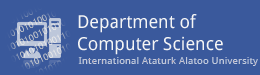
<style>
.page{position:relative;width:260px;height:75px;background:#3a599c}
.page>*{position:absolute;margin:0}
.t1{font:18px "DroidSans";color:#f5f5f5}
.t2{font:10px "DroidSans";letter-spacing:0.016em;color:#c3cbdc}
</style>
<div class="page">
<p class="t1" style="left:78px;top:14px;width:145px;height:41px">Department of<br>Computer Science</p>
<p class="t2" style="left:78px;top:57px;width:180px;height:9px">International Ataturk Alatoo University</p>
</div>
